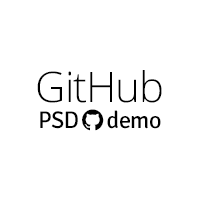
<style>
.page{position:relative;width:200px;height:200px;background:#ffffff}
.page>*{position:absolute;margin:0}
.t1{font:24px/42px "Signika-Regular";letter-spacing:-0.025em;color:#000000}
.t2{font:42px/42px "OpenSans-Light";letter-spacing:-0.025em;color:#000000}
</style>
<div class="page">
<p class="t1" style="left:37px;top:70px;width:125px;height:59px;text-align:center"><span class="t2">GitHub<br></span>PSD      demo</p>
</div>
